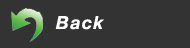
<style>
.page{position:relative;width:190px;height:48px;background:#333333}
.page>*{position:absolute;margin:0}
.t1{font:18px "HelveticaNeue-BoldItalic";letter-spacing:0.075em;color:#ffffff}
</style>
<div class="page">
<p class="t1" style="left:55px;top:16px;width:49px;height:14px">Back</p>
</div>
